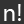
<style>
.page{position:relative;width:24px;height:24px;background:#333333}
.page>*{position:absolute;margin:0}
.t1{font:24px "SegoeUI";color:#ffffff}
</style>
<div class="page">
<p class="t1" style="left:4px;top:4px;width:17px;height:17px">n!</p>
</div>
